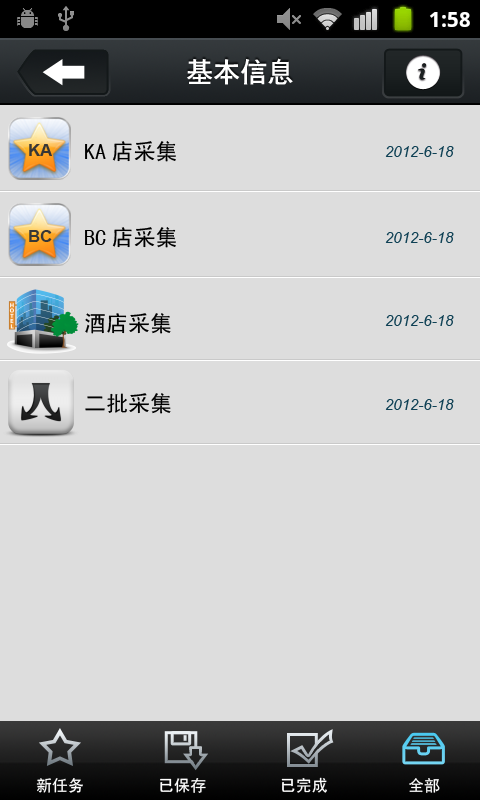
<style>
.page{position:relative;width:480px;height:800px;background:#dddddd}
.page>*{position:absolute;margin:0}
.t1{font:27px "CTCuHeiSJ";color:#ffffff}
.t2{font:16.7px "Arial-BoldMT";color:#373737}
.t3{font:22px "SimHei";color:#000000}
.t4{font:15px "Arial-ItalicMT";color:#0e4054}
.t5{font:16px "SimHei";color:#ffffff}
</style>
<div class="page">
<p class="t1" style="left:187px;top:58px;width:106px;height:27px">基本信息</p>
<p class="t2" style="left:29px;top:144px;width:23px;height:12px">KA</p>
<p class="t3" style="left:85px;top:141px;width:91px;height:21px">KA店采集</p>
<p class="t4" style="left:385px;top:146px;width:69px;height:11px">2012-6-18</p>
<p class="t2" style="left:29px;top:230px;width:23px;height:12px">BC</p>
<p class="t3" style="left:85px;top:227px;width:91px;height:21px">BC店采集</p>
<p class="t4" style="left:385px;top:232px;width:69px;height:11px">2012-6-18</p>
<p class="t3" style="left:85px;top:313px;width:86px;height:21px">酒店采集</p>
<p class="t4" style="left:385px;top:315px;width:69px;height:11px">2012-6-18</p>
<p class="t3" style="left:85px;top:393px;width:86px;height:21px">二批采集</p>
<p class="t4" style="left:385px;top:399px;width:69px;height:11px">2012-6-18</p>
<p class="t5" style="left:36px;top:778px;width:47px;height:15px">新任务</p>
<p class="t5" style="left:160px;top:778px;width:46px;height:15px">已保存</p>
<p class="t5" style="left:281px;top:777px;width:46px;height:16px">已完成</p>
<p class="t5" style="left:409px;top:778px;width:31px;height:15px">全部</p>
</div>
